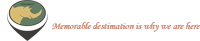
<style>
.page{position:relative;width:200px;height:41px;background:#ffffff}
.page>*{position:absolute;margin:0}
.t1{font:9.8px "MonotypeCorsiva";color:#cb8670}
</style>
<div class="page">
<p class="t1" style="left:52px;top:22px;width:148px;height:10px">Memorable destimation is why we are here</p>
<p class="t1" style="left:52px;top:22px;width:148px;height:10px">Memorable destimation is why we are here</p>
</div>
